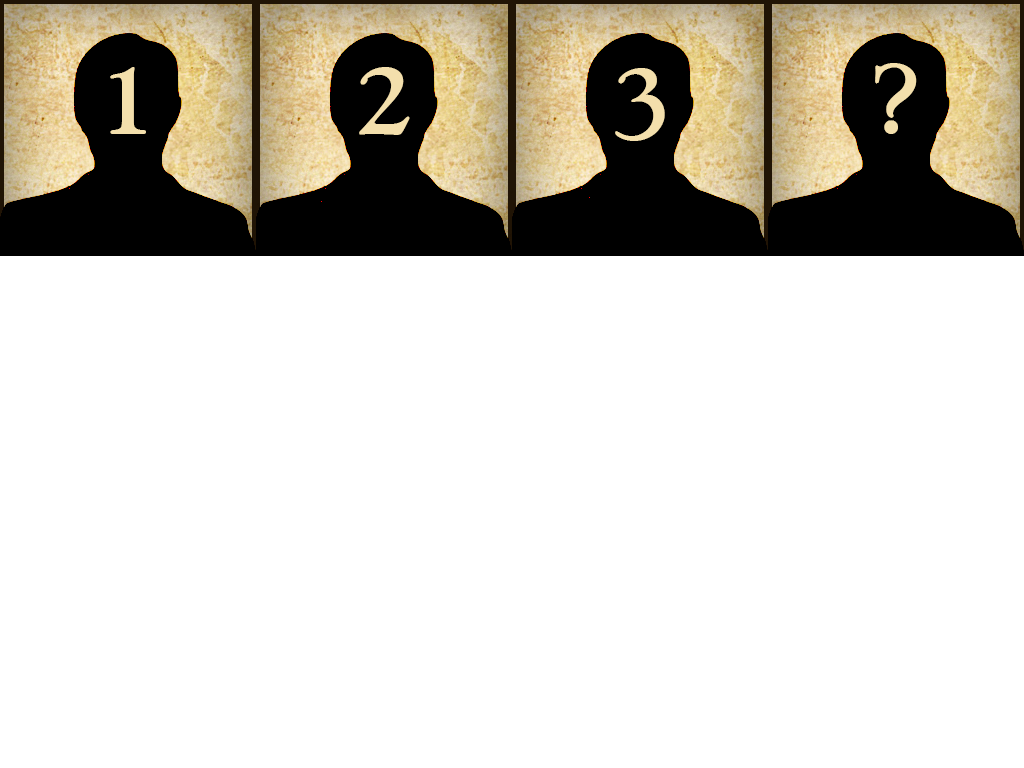
<style>
.page{position:relative;width:1024px;height:768px;background:#ffffff}
.page>*{position:absolute;margin:0}
.t1{font:20.8px "MaryJaneAntique";color:#f3dfac}
.t2{font:20.8px "MaryJaneAlternate";color:#f3dfac}
</style>
<div class="page">
<p class="t1" style="left:875px;top:63px;width:42px;height:71px;text-align:center">?</p>
<p class="t2" style="left:110px;top:67px;width:36px;height:67px;text-align:center">1</p>
<p class="t2" style="left:359px;top:67px;width:51px;height:68px;text-align:center">2</p>
<p class="t2" style="left:615px;top:68px;width:50px;height:73px;text-align:center">3</p>
</div>
